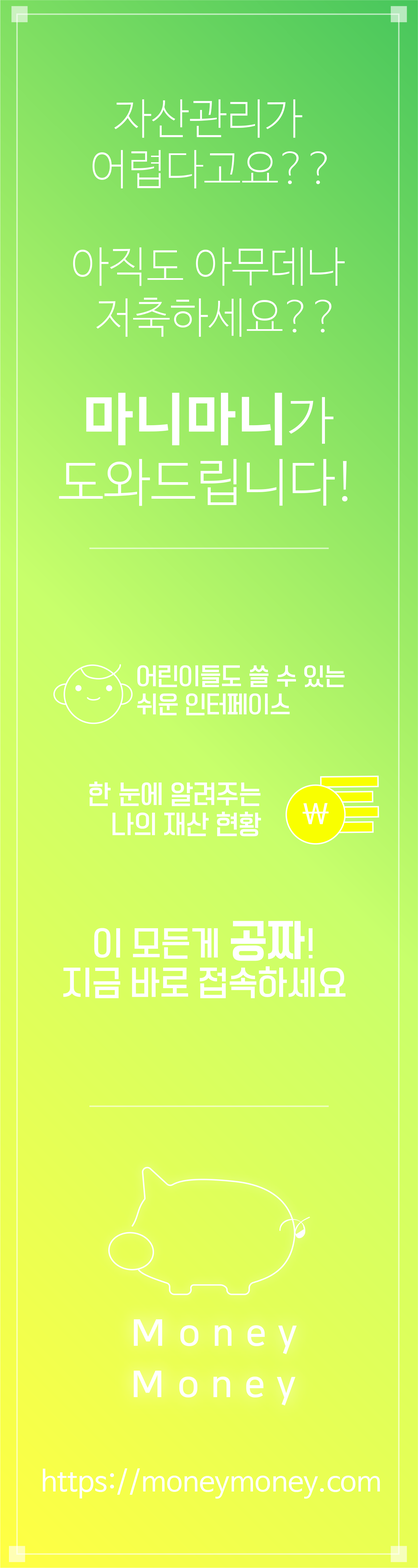
<style>
.page{position:relative;width:418px;height:1568px}
.page>*{position:absolute;margin:0}
.t1{font:42.3px "NanumBarunGothicUltraLight";color:#ffffff}
.t2{font:51.7px "NanumBarunGothicLight";color:#ffffff}
.t3{font:56.4px "NanumSquareEB";color:#ffffff}
.t4{font:23.5px "TTManbalchungchunL";color:#ffffff}
.t5{font:25.3px "TTManbalchungchunL";color:#ffffff}
.t6{font:29.2px "NanumSquareB";color:#ffffff}
.t7{font:32.9px "TTManbalchungchunL";color:#ffffff}
.t8{font:42.3px "TTManbalchungchunR";color:#ffffff}
.t9{font:36.8px/51.3px "NanumSquareB";letter-spacing:0.318em;color:#ffffff}
.t10{font:36.8px/51.3px "NanumSquareB";letter-spacing:0.318em;color:#ffffff;scale:1.12 1}
.t11{font:36.8px/51.3px "NanumSquareB";letter-spacing:0.318em;color:#ffffff;scale:1.09 1}
.t12{font:28.2px "NanumBarunGothic";color:#ffffff}
</style>
<div class="page">
<p class="t1" style="left:92px;top:99px;width:235px;height:89px;text-align:center">자산관리가<br> 어렵다고요??</p>
<p class="t1" style="left:73px;top:247px;width:272px;height:90px;text-align:center">아직도 아무데나<br>  저축하세요??</p>
<p class="t2" style="left:59px;top:393px;width:289px;height:113px;text-align:center"><span class="t3">마니마니</span>가<br>도와드립니다!</p>
<p class="t4" style="left:137px;top:665px;width:208px;height:50px">어린이들도 쓸 수 있는<br>쉬운 인터페이스</p>
<p class="t5" style="left:89px;top:782px;width:172px;height:54px;text-align:right">한 눈에 알려주는<br>나의 재산 현황</p>
<p class="t6" style="left:302px;top:803px;width:27px;height:21px">\</p>
<p class="t7" style="left:63px;top:921px;width:282px;height:77px;text-align:center">이 모든게 <span class="t8">공짜</span>!<br>지금 바로 접속하세요</p>
<p class="t9" style="left:133px;top:1319px;width:164px;height:86px"><span class="t10">M</span>oney<br><span class="t11">M</span>oney</p>
<p class="t12" style="left:43px;top:1468px;width:337px;height:31px">https://moneymoney.com</p>
</div>
